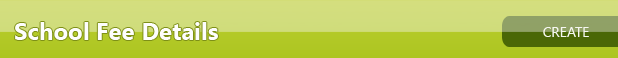
<style>
.page{position:relative;width:618px;height:58px}
.page>*{position:absolute;margin:0}
.t1{font:24px "SegoeUI-Bold";color:#fefefe}
.t2{font:14px "SegoeUI";color:#f6f7f1}
</style>
<div class="page">
<p class="t1" style="left:15px;top:22px;width:203px;height:18px">School Fee Details</p>
<p class="t2" style="left:543px;top:27px;width:46px;height:10px">CREATE</p>
</div>
